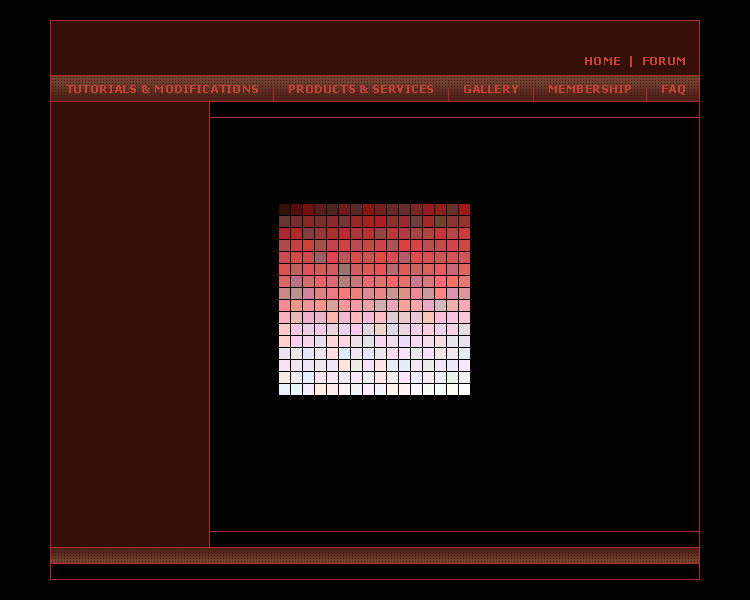
<style>
.page{position:relative;width:750px;height:600px;background:#000000}
.page>*{position:absolute;margin:0}
.t1{font:11px "Verdana-Bold";color:#c8423a}
</style>
<div class="page">
<p class="t1" style="left:585px;top:56px;width:100px;height:11px">HOME  |  FORUM</p>
<p class="t1" style="left:66px;top:85px;width:192px;height:8px">TUTORIALS &amp; MODIFICATIONS</p>
<p class="t1" style="left:289px;top:85px;width:144px;height:8px">PRODUCTS &amp; SERVICES</p>
<p class="t1" style="left:464px;top:85px;width:54px;height:8px">GALLERY</p>
<p class="t1" style="left:549px;top:85px;width:82px;height:8px">MEMBERSHIP</p>
<p class="t1" style="left:662px;top:85px;width:23px;height:10px">FAQ</p>
</div>
